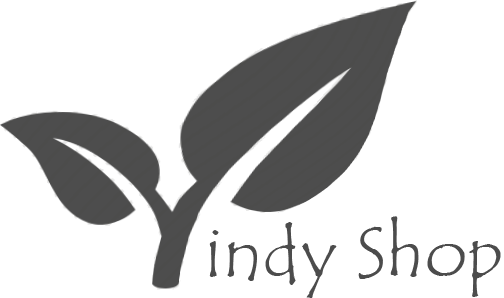
<style>
.page{position:relative;width:504px;height:298px;background:#ffffff}
.page>*{position:absolute;margin:0}
.t1{font:72px "TempusSansITC";color:#4c4c4c}
</style>
<div class="page">
<p class="t1" style="left:209px;top:216px;width:292px;height:82px">indy Shop</p>
</div>
